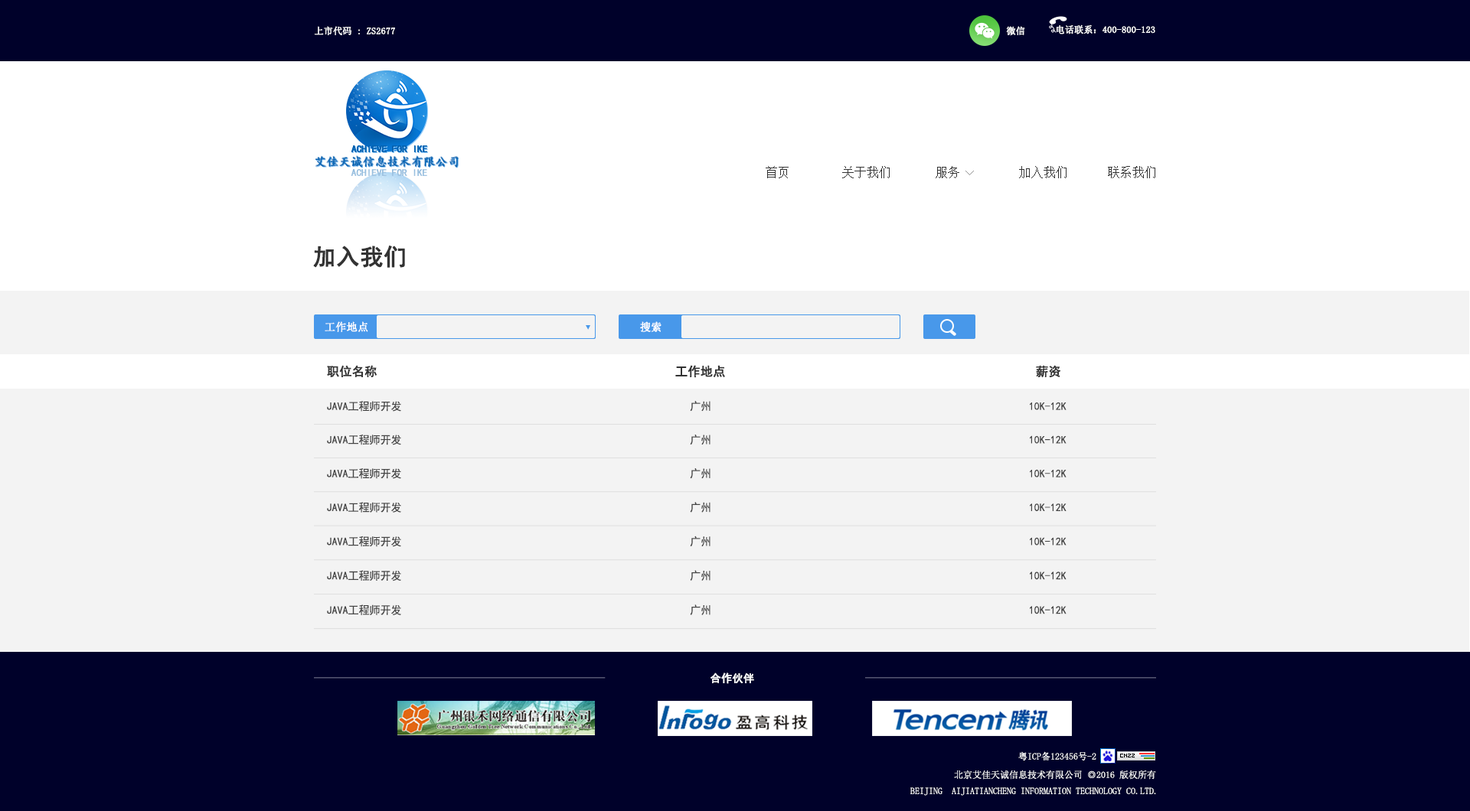
<style>
.page{position:relative;width:1470px;height:811px;background:#f3f3f3}
.page>*{position:absolute;margin:0}
.t1{font:9.2px "SimSun";color:#ffffff;font-weight:bold}
.t2{font:9.8px "¿¬Ìå";color:#0361b0;font-weight:bold}
.t3{font:11.8px "¿¬Ìå";color:#0361b0;font-weight:bold}
.t4{font:11.8px "¿¬Ìå";font-weight:bold}
.t5{font:9.8px "¿¬Ìå";color:#9ac0df;font-weight:bold}
.t6{font:12.2px "SimSun";color:#333333;text-transform:uppercase}
.t7{font:12.2px "SimSun";color:#939393;text-transform:uppercase}
.t8{font:23px "SimHei";color:#333333;text-transform:uppercase;font-weight:bold}
.t9{font:10.7px "SimSun";color:#ffffff;text-transform:uppercase;font-weight:bold}
.t10{font:12.2px "SimHei";color:#333333;text-transform:uppercase;font-weight:bold}
.t11{font:10.7px "SimHei";color:#444444;text-transform:uppercase}
.t12{font:10.8px "SimHei";color:#444444;text-transform:uppercase}
.t13{font:10.9px "SimHei";color:#444444;text-transform:uppercase}
.t14{font:11px "SimHei";color:#444444;text-transform:uppercase}
.t15{font:10.7px "SimHei";color:#ffffff;text-transform:uppercase;font-weight:bold}
.t16{font:9.2px "SimSun";color:#ffffff;text-transform:uppercase}
</style>
<div class="page">
<p class="t1" style="left:314px;top:26px;width:81px;height:9px">上市代码 : ZS2677</p>
<p class="t1" style="left:1006px;top:26px;width:19px;height:10px">微信</p>
<p class="t1" style="left:1056px;top:24px;width:99px;height:10px">电话联系：400-800-123</p>
<p class="t2" style="left:351px;top:145px;width:76px;height:7px">ACHIEVE FOR IKE</p>
<p class="t2" style="left:351px;top:145px;width:76px;height:7px">ACHIEVE FOR IKE</p>
<p class="t3" style="left:315px;top:156px;width:143px;height:12px">艾佳天诚信息技术有限公司</p>
<p class="t4" style="left:315px;top:155px;width:143px;height:12px">艾佳天诚信息技术有限公司</p>
<p class="t5" style="left:351px;top:169px;width:76px;height:7px">ACHIEVE FOR IKE</p>
<p class="t6" style="left:765px;top:166px;width:23px;height:12px">首页</p>
<p class="t6" style="left:842px;top:166px;width:47px;height:12px">关于我们</p>
<p class="t6" style="left:935px;top:166px;width:24px;height:12px">服务</p>
<p class="t7" style="left:965px;top:171px;width:9px;height:4px;rotate:90deg">&gt;</p>
<p class="t6" style="left:1019px;top:166px;width:47px;height:12px">加入我们</p>
<p class="t6" style="left:1108px;top:166px;width:47px;height:12px">联系我们</p>
<p class="t8" style="left:313px;top:245px;width:92px;height:23px">加入我们</p>
<p class="t9" style="left:325px;top:321px;width:43px;height:11px">工作地点</p>
<p class="t9" style="left:640px;top:321px;width:21px;height:11px">搜索</p>
<p class="t10" style="left:327px;top:365px;width:50px;height:13px">职位名称</p>
<p class="t10" style="left:675px;top:365px;width:50px;height:13px">工作地点</p>
<p class="t10" style="left:1036px;top:365px;width:24px;height:13px">薪资</p>
<p class="t11" style="left:327px;top:401px;width:74px;height:11px">Java工程师开发</p>
<p class="t11" style="left:690px;top:401px;width:20px;height:11px">广州</p>
<p class="t11" style="left:1030px;top:403px;width:36px;height:7px">10k-12k</p>
<p class="t12" style="left:327px;top:435px;width:74px;height:10px">Java工程师开发</p>
<p class="t12" style="left:690px;top:435px;width:20px;height:10px">广州</p>
<p class="t12" style="left:1030px;top:436px;width:36px;height:8px">10k-12k</p>
<p class="t12" style="left:327px;top:468px;width:74px;height:11px">Java工程师开发</p>
<p class="t12" style="left:690px;top:468px;width:20px;height:11px">广州</p>
<p class="t12" style="left:1030px;top:469px;width:36px;height:9px">10k-12k</p>
<p class="t13" style="left:327px;top:502px;width:74px;height:11px">Java工程师开发</p>
<p class="t13" style="left:690px;top:502px;width:20px;height:11px">广州</p>
<p class="t13" style="left:1030px;top:504px;width:36px;height:7px">10k-12k</p>
<p class="t13" style="left:327px;top:536px;width:74px;height:11px">Java工程师开发</p>
<p class="t13" style="left:690px;top:536px;width:20px;height:11px">广州</p>
<p class="t13" style="left:1030px;top:537px;width:36px;height:9px">10k-12k</p>
<p class="t14" style="left:327px;top:570px;width:74px;height:12px">Java工程师开发</p>
<p class="t14" style="left:690px;top:570px;width:20px;height:11px">广州</p>
<p class="t14" style="left:1030px;top:572px;width:36px;height:8px">10k-12k</p>
<p class="t14" style="left:327px;top:605px;width:74px;height:10px">Java工程师开发</p>
<p class="t14" style="left:690px;top:605px;width:20px;height:10px">广州</p>
<p class="t14" style="left:1030px;top:606px;width:36px;height:9px">10k-12k</p>
<p class="t15" style="left:710px;top:673px;width:44px;height:11px">合作伙伴</p>
<p class="t16" style="left:1018px;top:752px;width:78px;height:9px">粤ICP备123456号-2</p>
<p class="t16" style="left:954px;top:770px;width:202px;height:10px">北京艾佳天诚信息技术有限公司 ◎2016 版权所有</p>
<p class="t16" style="left:910px;top:788px;width:246px;height:8px">BeiJing  AiJiaTianCheng Information Technology Co.Ltd.</p>
</div>
